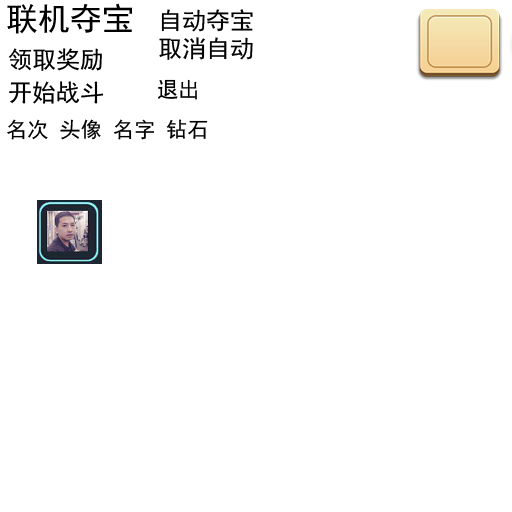
<style>
.page{position:relative;width:512px;height:512px;background:#ffffff}
.page>*{position:absolute;margin:0}
.t1{font:32px "SimHei";color:#000000}
.t2{font:24px "SimHei";color:#000000}
.t3{font:21.3px "SimHei";color:#000000}
</style>
<div class="page">
<p class="t1" style="left:7px;top:3px;width:126px;height:31px">联机夺宝</p>
<p class="t2" style="left:161px;top:9px;width:92px;height:23px">自动夺宝</p>
<p class="t2" style="left:159px;top:37px;width:94px;height:23px">取消自动</p>
<p class="t2" style="left:8px;top:48px;width:94px;height:23px">领取奖励</p>
<p class="t2" style="left:9px;top:81px;width:95px;height:23px">开始战斗</p>
<p class="t3" style="left:158px;top:79px;width:39px;height:21px">退出</p>
<p class="t3" style="left:7px;top:119px;width:201px;height:21px">名次 头像 名字 钻石</p>
</div>
